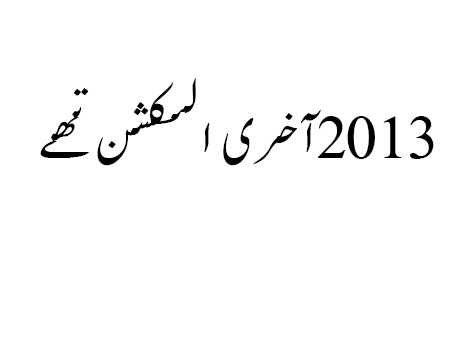
<style>
.page{position:relative;width:454px;height:340px;background:#ffffff}
.page>*{position:absolute;margin:0}
.t1{font:60px "PakNastaleeq";color:#000000}
</style>
<div class="page">
<p class="t1" style="left:40px;top:78px;width:394px;height:88px">2013آخری الیکشن تھے</p>
</div>
